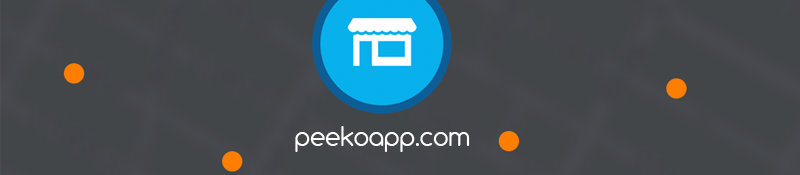
<style>
.page{position:relative;width:800px;height:175px;background:#434649}
.page>*{position:absolute;margin:0}
.t1{font:24.6px "Comfortaa";color:#ffffff}
</style>
<div class="page">
<p class="t1" style="left:295px;top:126px;width:175px;height:26px">peekoapp.com</p>
</div>
